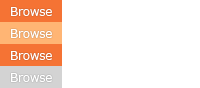
<style>
.page{position:relative;width:200px;height:88px;background:#ffffff}
.page>*{position:absolute;margin:0}
.t1{font:12px/22px "Verdana";letter-spacing:-0.025em;color:#ffffff}
.t2{font:12px/22px "Verdana";letter-spacing:-0.025em;color:#ebebeb}
</style>
<div class="page">
<p class="t1" style="left:11px;top:7px;width:41px;height:75px">Browse<br>Browse<br>Browse<br><span class="t2">Browse</span></p>
</div>
